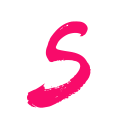
<style>
.page{position:relative;width:128px;height:128px;background:#ffffff}
.page>*{position:absolute;margin:0}
.t1{font:166.7px "YUWEIXSF2019";color:#f80b6a}
</style>
<div class="page">
<p class="t1" style="left:27px;top:21px;width:64px;height:87px">s</p>
</div>
